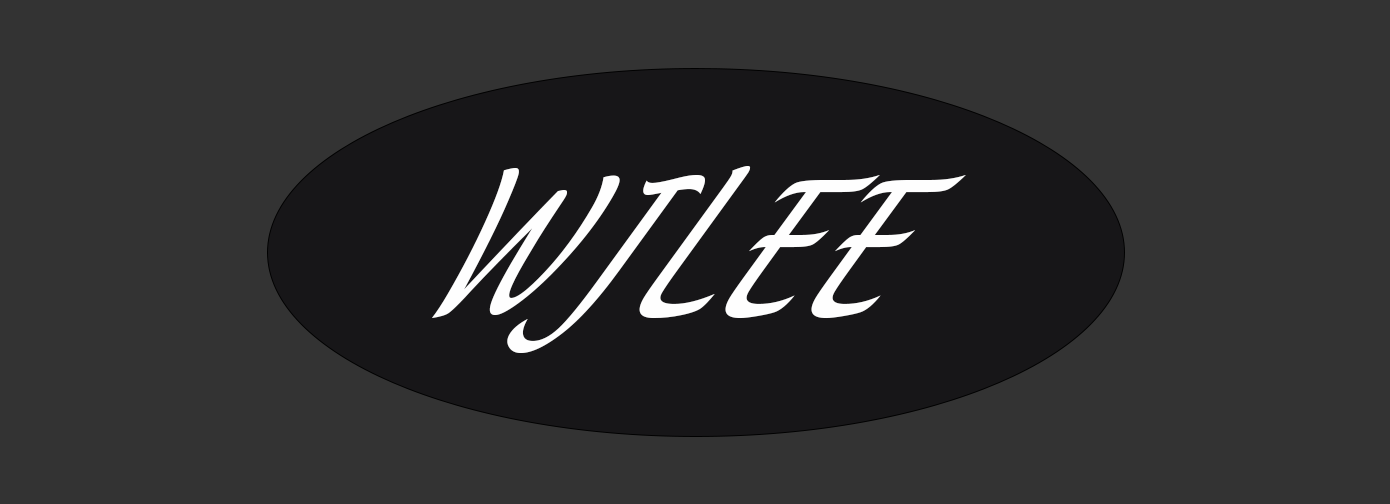
<style>
.page{position:relative;width:1390px;height:504px;background:#333333}
.page>*{position:absolute;margin:0}
.t1{font:215.7px "LucidaHandwriting-Italic";color:#fefefe;scale:0.64 1}
.t2{font:215.7px "YetR-HM";color:#fefefe;scale:0.64 1}
</style>
<div class="page">
<p class="t1" style="left:432px;top:166px;width:534px;height:187px"><span class="t2"><br></span>WJLEE</p>
</div>
